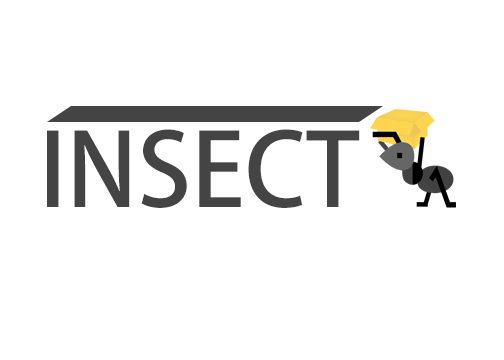
<style>
.page{position:relative;width:504px;height:360px;background:#ffffff}
.page>*{position:absolute;margin:0}
.t1{font:100px "AdobeFanHeitiStd-Bold";color:#444444}
</style>
<div class="page">
<p class="t1" style="left:47px;top:129px;width:313px;height:79px">INSECT</p>
</div>
